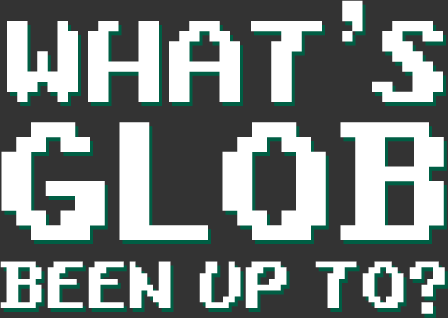
<style>
.page{position:relative;width:448px;height:318px;background:#333333}
.page>*{position:absolute;margin:0}
.t1{font:122px "YosterIslandReg";color:#ffffff;text-transform:uppercase}
.t2{font:177.1px "YosterIslandReg";color:#ffffff;text-transform:uppercase}
.t3{font:70px "YosterIslandReg";color:#ffffff;text-transform:uppercase}
</style>
<div class="page">
<p class="t1" style="left:7px;top:0px;width:436px;height:102px">WHAT’S</p>
<p class="t2" style="left:1px;top:122px;width:443px;height:118px">GLOB</p>
<p class="t3" style="left:0px;top:261px;width:445px;height:53px">BEEN UP TO?</p>
</div>
